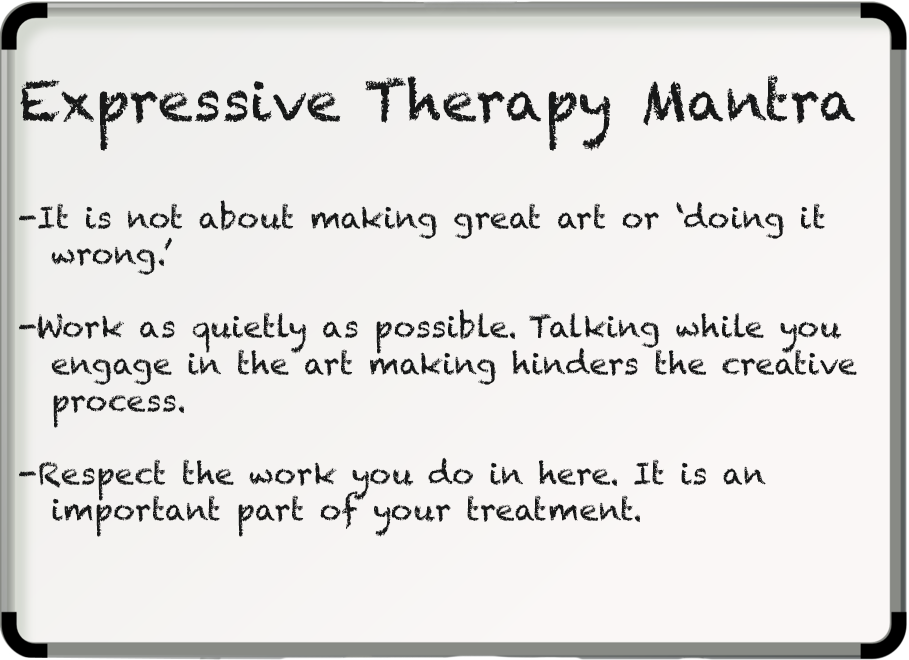
<style>
.page{position:relative;width:909px;height:660px}
.page>*{position:absolute;margin:0}
.t1{font:30.5px "Chalkduster";color:#171818}
.t2{font:55.9px "Chalkduster";color:#171818}
</style>
<div class="page">
<p class="t1" style="left:19px;top:75px;width:838px;height:462px"><span class="t2">Expressive Therapy Mantra<br><br></span><br>-It is not about making great art or ‘doing it <br> wrong.’<br><br>-Work as quietly as possible. Talking while you <br> engage in the art making hinders the creative <br> process.<br><br>-Respect the work you do in here. It is an <br> important part of your treatment.</p>
</div>
